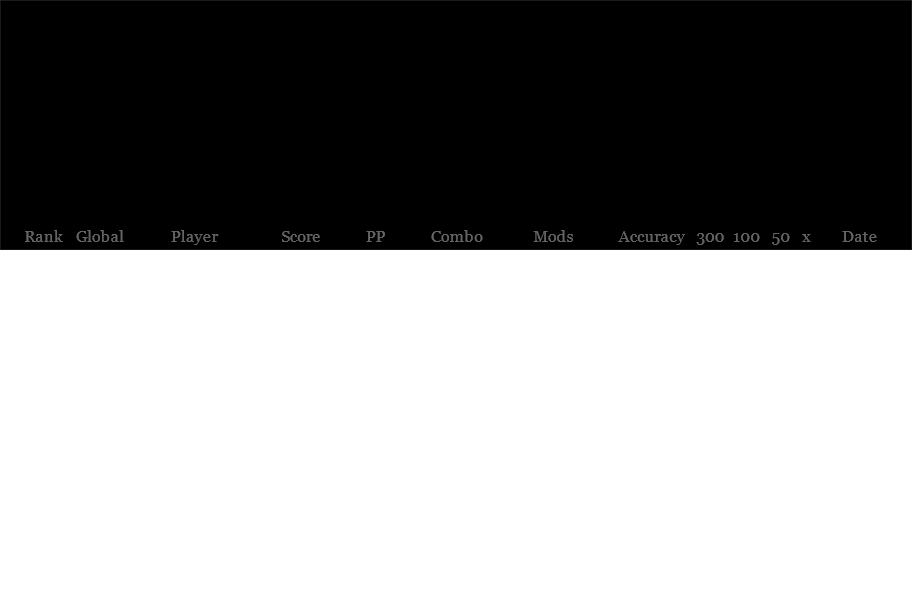
<style>
.page{position:relative;width:912px;height:608px;background:#ffffff}
.page>*{position:absolute;margin:0}
.t1{font:16px "Georgia";color:#646464}
</style>
<div class="page">
<p class="t1" style="left:25px;top:230px;width:38px;height:12px">Rank</p>
<p class="t1" style="left:76px;top:230px;width:48px;height:12px">Global</p>
<p class="t1" style="left:171px;top:230px;width:48px;height:15px">Player</p>
<p class="t1" style="left:282px;top:231px;width:38px;height:11px">Score</p>
<p class="t1" style="left:366px;top:231px;width:19px;height:11px">PP</p>
<p class="t1" style="left:431px;top:230px;width:52px;height:12px">Combo</p>
<p class="t1" style="left:533px;top:230px;width:40px;height:12px">Mods</p>
<p class="t1" style="left:618px;top:231px;width:67px;height:14px">Accuracy</p>
<p class="t1" style="left:696px;top:233px;width:28px;height:12px">300</p>
<p class="t1" style="left:734px;top:233px;width:26px;height:9px">100</p>
<p class="t1" style="left:772px;top:233px;width:18px;height:12px">50</p>
<p class="t1" style="left:842px;top:231px;width:35px;height:11px">Date</p>
<p class="t1" style="left:802px;top:234px;width:9px;height:8px">x</p>
</div>
